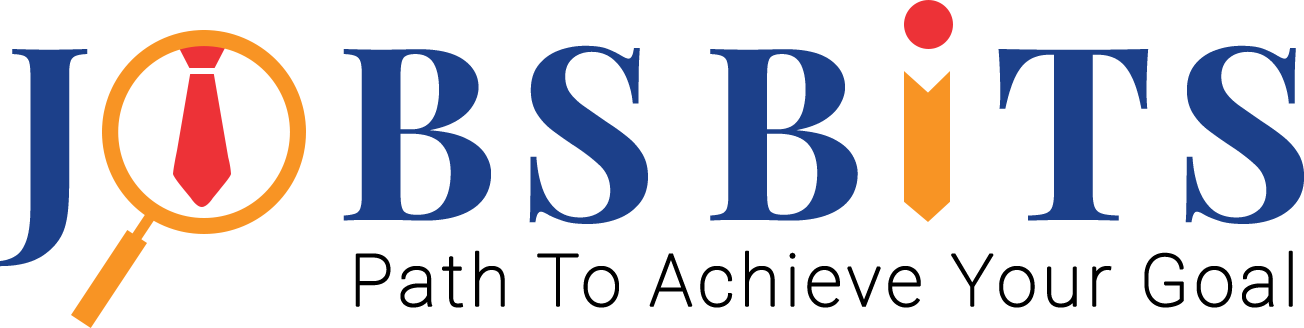
<style>
.page{position:relative;width:1304px;height:328px;background:#ffffff}
.page>*{position:absolute;margin:0}
.t1{font:242.1px "PlayfairDisplay-Bold";letter-spacing:0.075em;color:#1c408a;font-weight:bold}
.t2{font:72px "Roboto-Thin";letter-spacing:0.05em;color:#000000;font-weight:bold}
</style>
<div class="page">
<p class="t1" style="left:0px;top:45px;width:1304px;height:222px">J   BS B  TS</p>
<p class="t2" style="left:355px;top:250px;width:938px;height:58px">Path To Achieve Your Goal</p>
</div>
